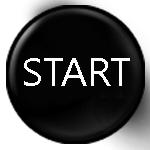
<style>
.page{position:relative;width:150px;height:150px;background:#040404}
.page>*{position:absolute;margin:0}
.t1{font:40px "SegoeUI";color:#fdfcfc}
</style>
<div class="page">
<p class="t1" style="left:24px;top:58px;width:106px;height:28px">START</p>
</div>
